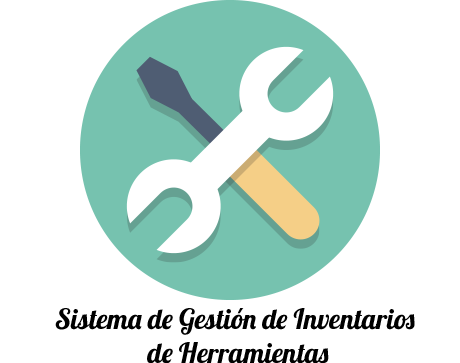
<style>
.page{position:relative;width:460px;height:363px;background:#ffffff}
.page>*{position:absolute;margin:0}
.t1{font:28px "Lobster1.4";color:#000000}
</style>
<div class="page">
<p class="t1" style="left:55px;top:308px;width:360px;height:56px;text-align:center">Sistema de Gestión de Inventarios <br>de Herramientas</p>
</div>
